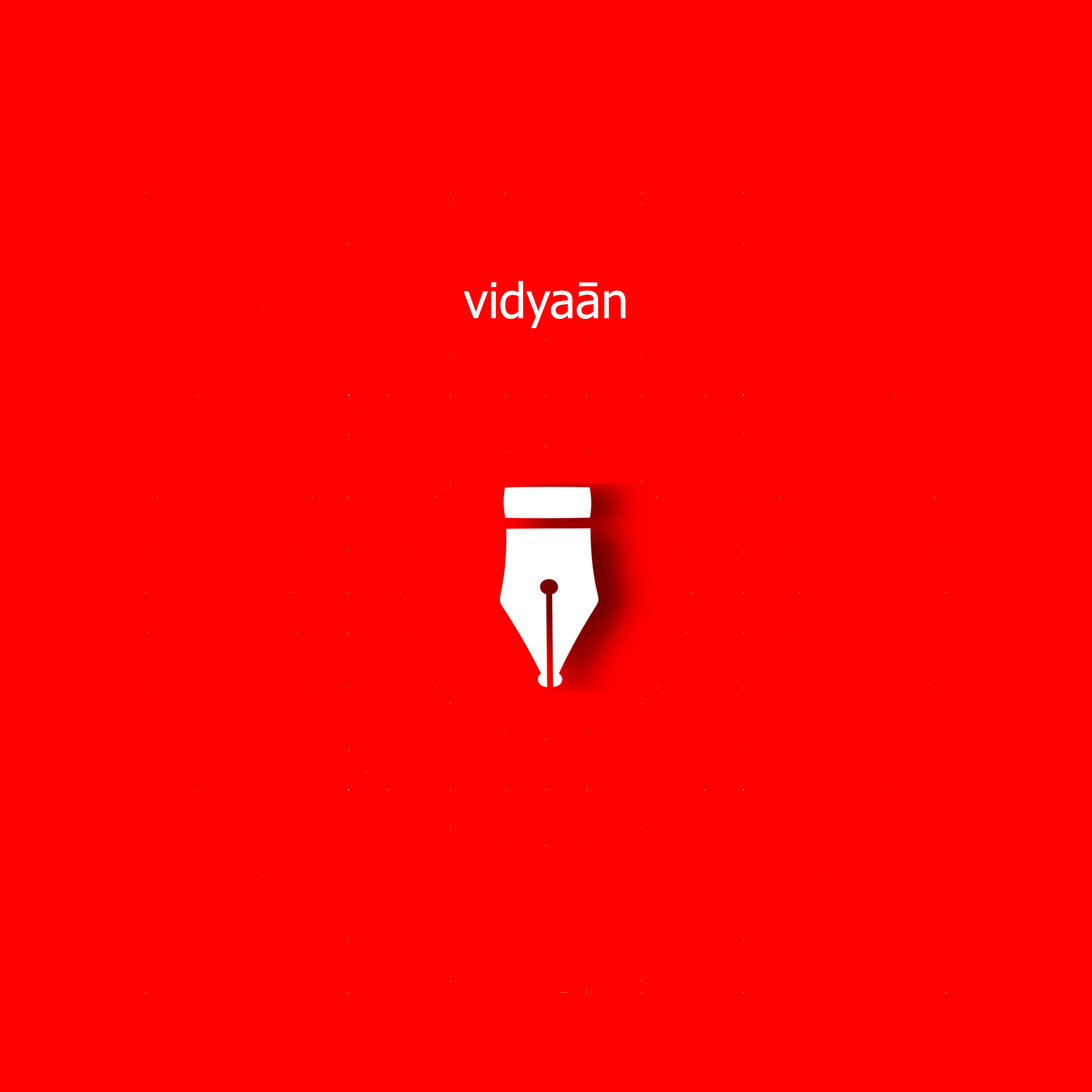
<style>
.page{position:relative;width:1092px;height:1092px;background:#ff0000}
.page>*{position:absolute;margin:0}
.t1{font:49px "Tahoma";color:#ffffff}
</style>
<div class="page">
<p class="t1" style="left:463px;top:281px;width:163px;height:47px">vidyaān</p>
</div>
